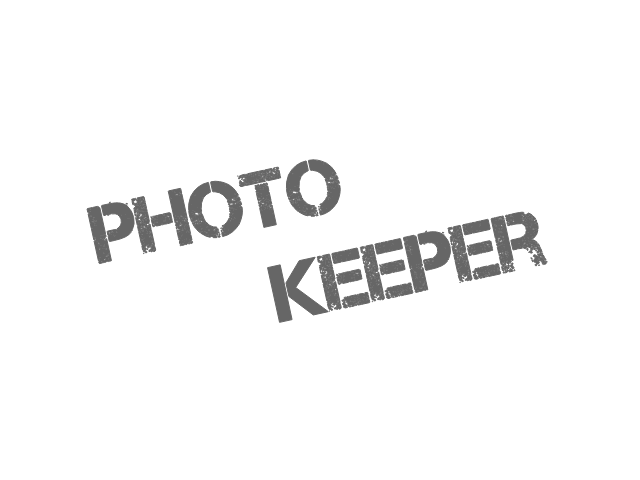
<style>
.page{position:relative;width:640px;height:480px;background:#ffffff}
.page>*{position:absolute;margin:0}
.t1{font:80px "Captureit";color:#666666}
</style>
<div class="page">
<p class="t1" style="left:86px;top:157px;width:463px;height:167px;rotate:-12deg">photo<br>       keeper</p>
</div>
